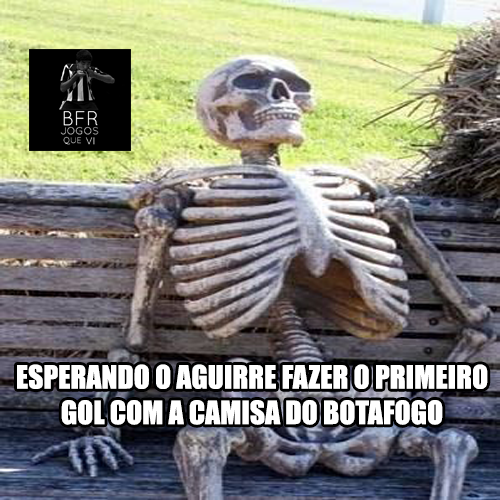
<style>
.page{position:relative;width:500px;height:500px}
.page>*{position:absolute;margin:0}
.t1{font:29.6px "Impact";color:#ffffff}
</style>
<div class="page">
<p class="t1" style="left:17px;top:364px;width:471px;height:61px;text-align:center">ESPERANDO O AGUIRRE FAZER O PRIMEIRO<br>GOL COM A CAMISA DO BOTAFOGO</p>
</div>
